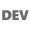
<style>
.page{position:relative;width:30px;height:30px;background:#ffffff}
.page>*{position:absolute;margin:0}
.t1{font:14px "SegoeWP-Black";letter-spacing:-0.025em;color:#6b6b6b}
</style>
<div class="page">
<p class="t1" style="left:2px;top:10px;width:27px;height:10px">DEV</p>
</div>
